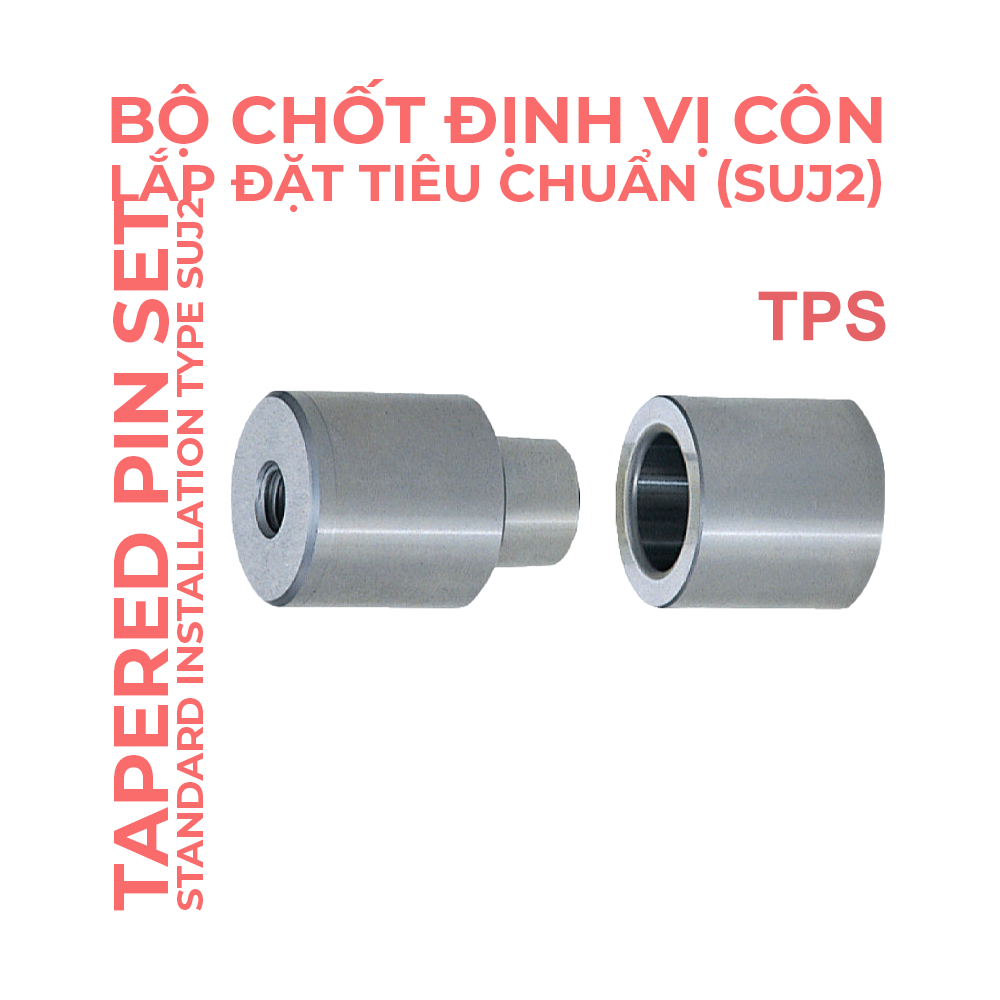
<style>
.page{position:relative;width:1000px;height:1000px;background:#ffffff}
.page>*{position:absolute;margin:0}
.t1{font:50px "Montserrat-Bold";color:#fa6b6b;text-transform:uppercase}
.t2{font:38.1px "Montserrat-Bold";color:#fa6b6b;text-transform:uppercase}
</style>
<div class="page">
<p class="t1" style="left:111px;top:79px;width:771px;height:133px;text-align:center">Bộ chốt định vị côn<br>lắp đặt tiêu chuẩn (SUJ2)</p>
<p class="t2" style="left:113px;top:198px;width:90px;height:713px;text-align:center;rotate:-90deg">Tapered Pin Set<br>Standard Installation Type SUJ2</p>
</div>
